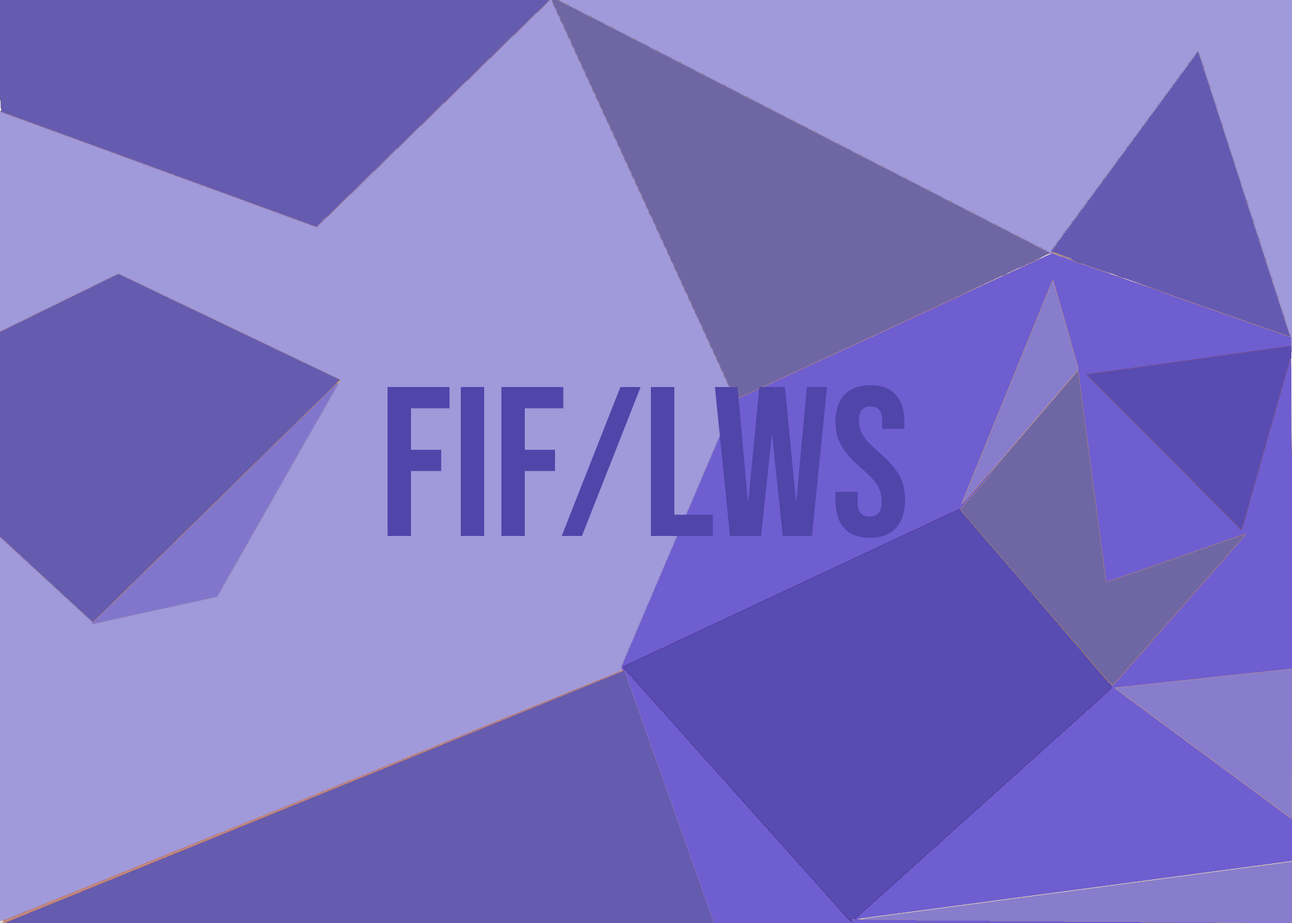
<style>
.page{position:relative;width:1292px;height:923px;background:#a099da}
.page>*{position:absolute;margin:0}
.t1{font:212.8px "BebasNeue-Regular";color:#5f579f}
</style>
<div class="page">
<p class="t1" style="left:388px;top:385px;width:517px;height:153px">Fif/lws</p>
</div>
